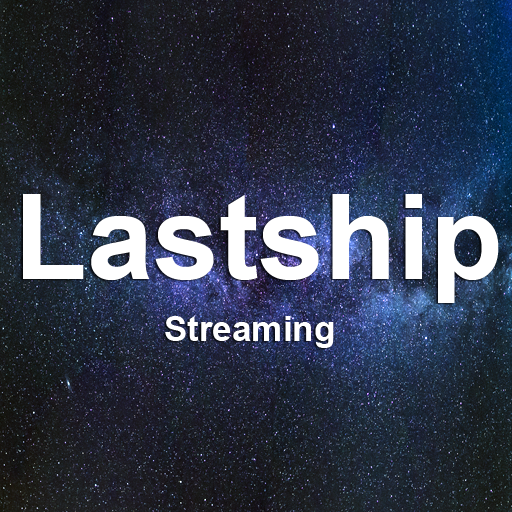
<style>
.page{position:relative;width:512px;height:512px}
.page>*{position:absolute;margin:0}
.t1{font:118.8px "Arial-BoldMT";color:#ffffff}
.t2{font:35px "Arial-BoldMT";color:#ffffff}
</style>
<div class="page">
<p class="t1" style="left:23px;top:194px;width:476px;height:109px">Lastship</p>
<p class="t2" style="left:165px;top:316px;width:169px;height:32px">Streaming</p>
</div>
